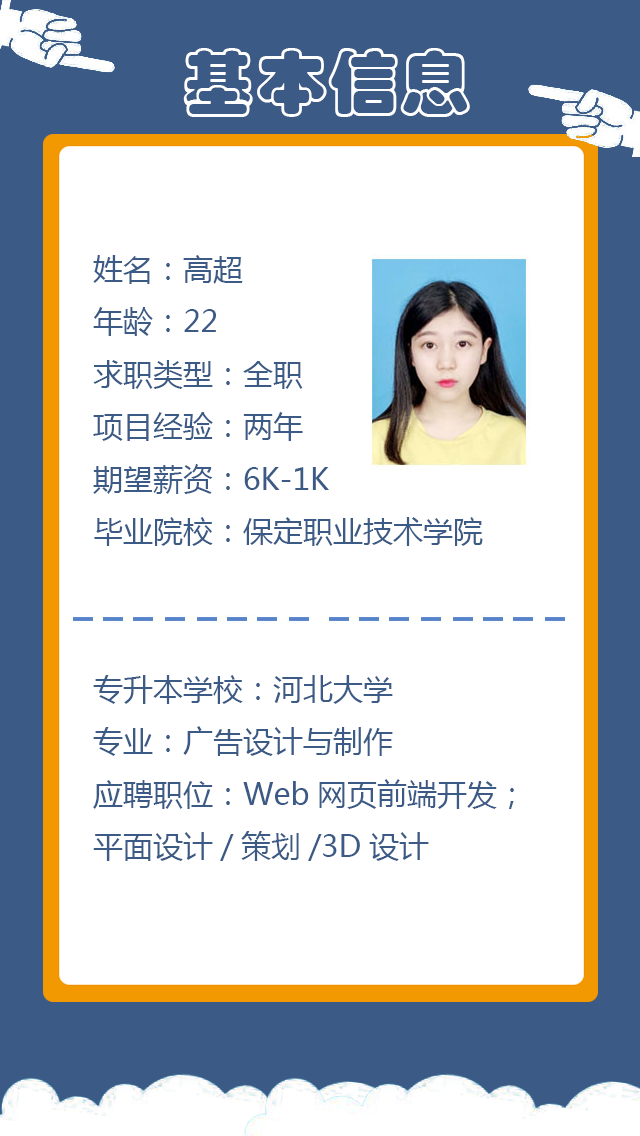
<style>
.page{position:relative;width:640px;height:1136px;background:#ffffff}
.page>*{position:absolute;margin:0}
.t1{font:72px "STCaiyun";color:#ffffff}
.t2{font:30px "MicrosoftYaHei";color:#3b5a85}
</style>
<div class="page">
<p class="t1" style="left:183px;top:48px;width:287px;height:69px">基本信息</p>
<p class="t2" style="left:93px;top:255px;width:421px;height:606px">姓名：高超<br>年龄：22<br>求职类型：全职<br>项目经验：两年<br>期望薪资：6K-1K<br>毕业院校：保定职业技术学院<br><br><br>专升本学校：河北大学<br>专业：广告设计与制作<br>应聘职位：Web网页前端开发；<br>平面设计/策划/3D设计</p>
</div>
